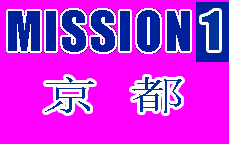
<style>
.page{position:relative;width:229px;height:144px;background:#ff00ff}
.page>*{position:absolute;margin:0}
.t1{font:48.7px "Impact";color:#003399;scale:1.06 1}
.t2{font:40.2px "SimSun";color:#003399;scale:1.4 1}
</style>
<div class="page">
<p class="t1" style="left:202px;top:11px;width:17px;height:39px">1</p>
<p class="t2" style="left:45px;top:77px;width:137px;height:36px">京 都</p>
</div>
